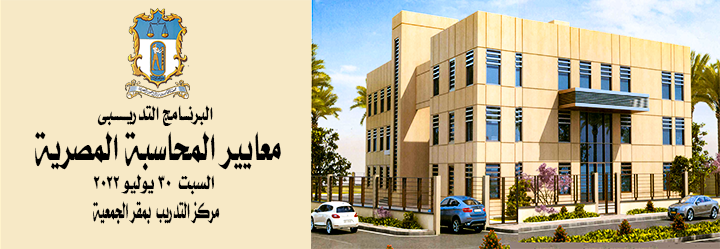
<style>
.page{position:relative;width:720px;height:249px;background:#f7e9c6}
.page>*{position:absolute;margin:0}
.t1{font:22.5px "mohammad-bold-art-1";color:#000000;scale:0.64 1}
.t2{font:45px "mohammad-bold-art-1";color:#000000;scale:0.56 1}
.t3{font:22.5px "mohammad-bold-art-1";color:#000000;scale:0.7 1}
.t4{font:25.5px "mohammad-bold-art-1";color:#000000;scale:0.44 1}
</style>
<div class="page">
<p class="t1" style="left:97px;top:105px;width:116px;height:21px">البرنـــامج التدريــــــبى</p>
<p class="t2" style="left:35px;top:131px;width:246px;height:40px">معايير المحاسبة المصرية</p>
<p class="t3" style="left:93px;top:174px;width:121px;height:21px">السبت  30 يوليو 2022</p>
<p class="t4" style="left:93px;top:201px;width:127px;height:24px">مركز التدريب  بمقر الجمعية</p>
</div>
